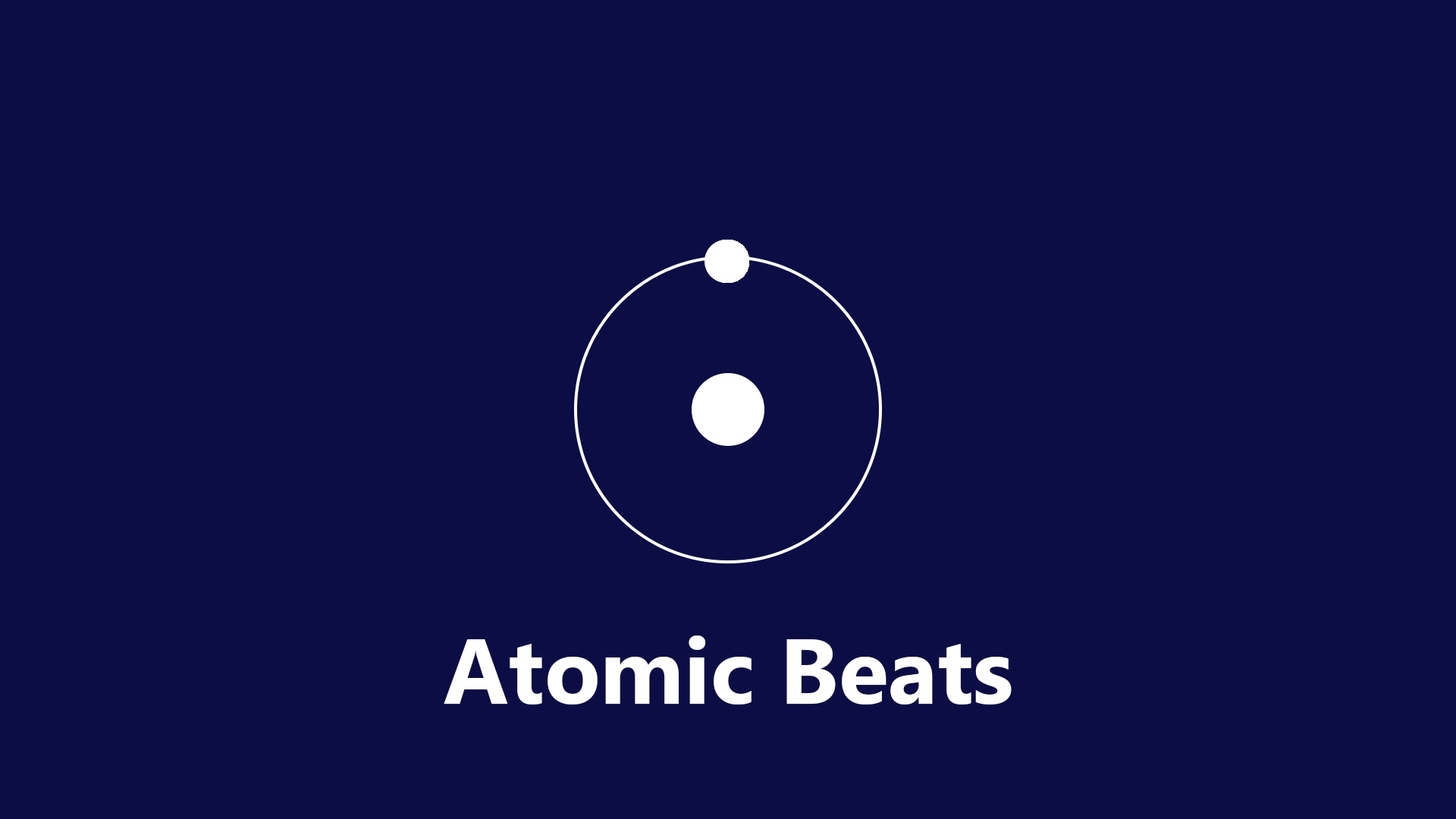
<style>
.page{position:relative;width:1456px;height:819px;background:#0b0d44}
.page>*{position:absolute;margin:0}
.t1{font:91.8px "MicrosoftTaiLe-Bold";color:#ffffff}
</style>
<div class="page">
<p class="t1" style="left:444px;top:635px;width:568px;height:69px">Atomic Beats</p>
</div>
